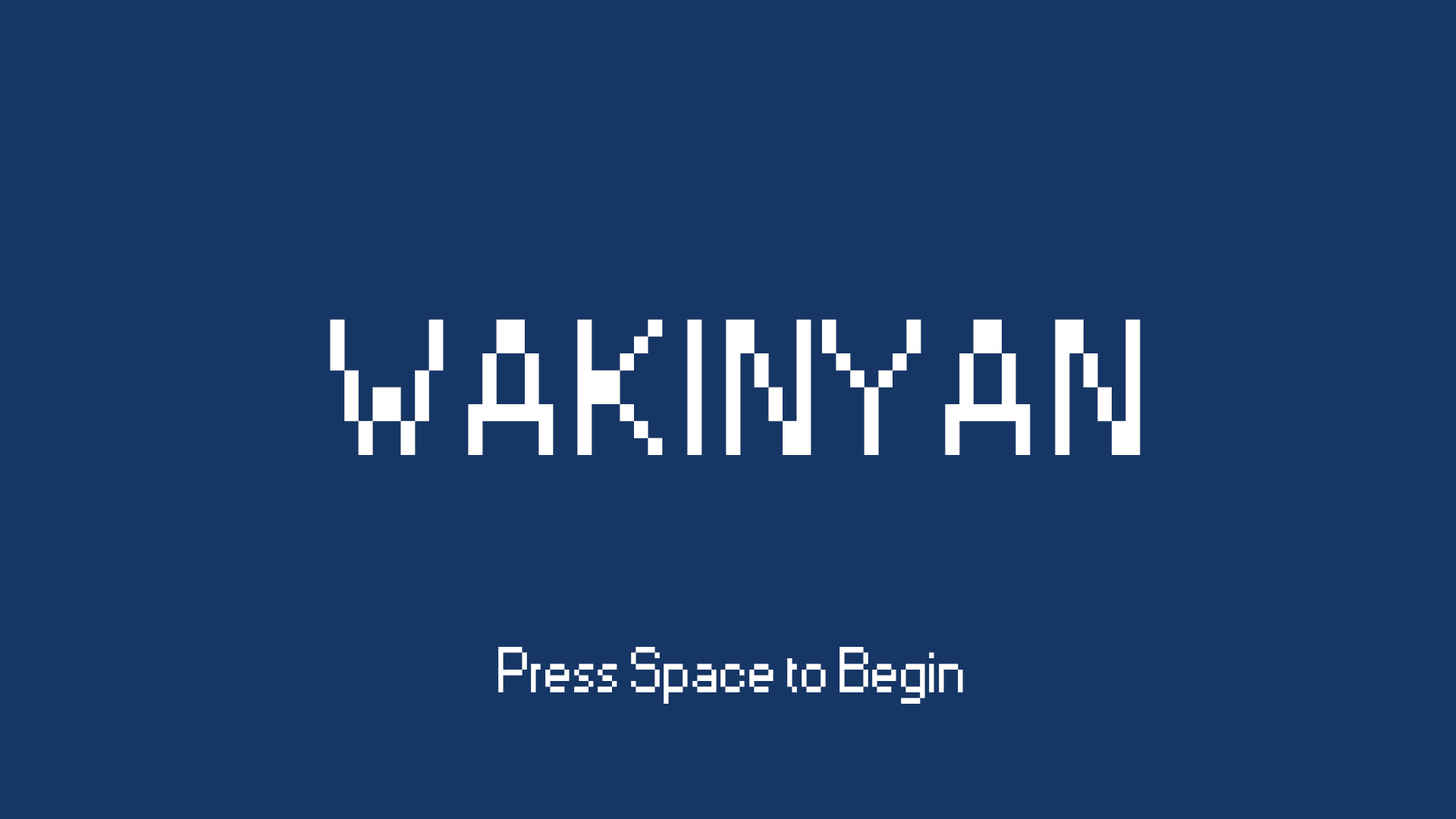
<style>
.page{position:relative;width:1456px;height:819px;background:#163666}
.page>*{position:absolute;margin:0}
.t1{font:180.5px "Small Fonts";letter-spacing:0.06em;color:#ffffff}
.t2{font:60.7px "Small Fonts";color:#ffffff}
</style>
<div class="page">
<p class="t1" style="left:330px;top:319px;width:811px;height:136px">WAKINYAN</p>
<p class="t2" style="left:498px;top:647px;width:465px;height:57px">Press Space to Begin</p>
</div>
